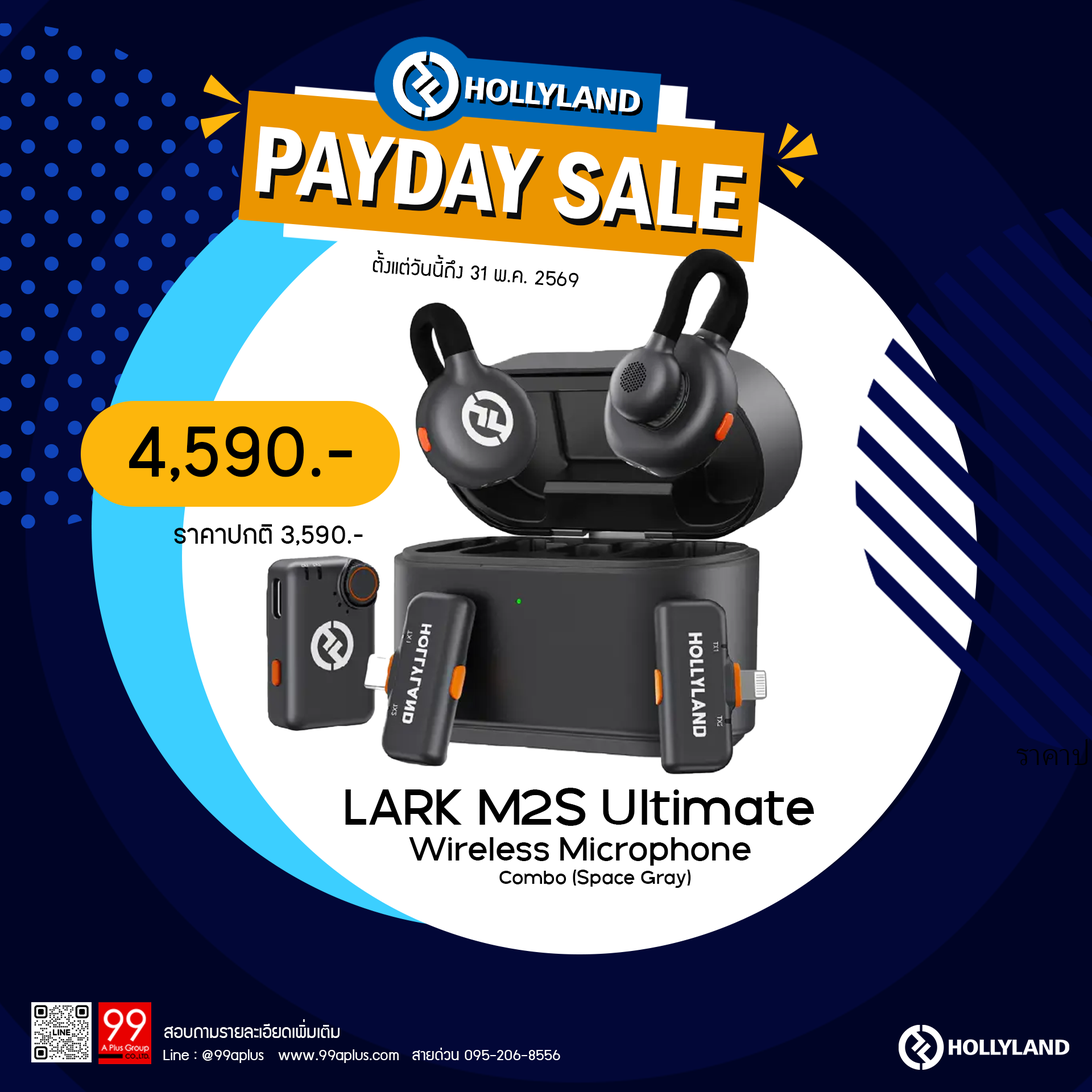
<style>
.page{position:relative;width:1092px;height:1092px;background:#020737}
.page>*{position:absolute;margin:0}
.t1{font:97.5px "FranklinGothic-DemiCond";color:#ffffff}
.t2{font:97.5px "FranklinGothic-DemiCond"}
.t3{font:23.2px "supermarket";color:#000000}
.t4{font:83.5px "PK-NakhonPathom-Demo";color:#000000}
.t5{font:30.3px "PK-NakhonPathom-Demo";color:#000000}
.t6{font:54px "GalakPro-Demo";color:#000000}
.t7{font:35.6px "GalakPro-Demo";color:#000000}
.t8{font:20.4px "GalakPro-Demo";color:#000000}
.t9{font:19.8px "supermarket";color:#ffffff}
.t10{font:17.2px "supermarket";color:#ffffff}
</style>
<div class="page">
<p class="t1" style="left:255px;top:126px;width:488px;height:105px;rotate:5deg">PAYDAY SALE</p>
<p class="t2" style="left:259px;top:133px;width:488px;height:105px;rotate:5deg">PAYDAY SALE</p>
<p class="t3" style="left:373px;top:250px;width:205px;height:37px;rotate:4deg">ตั้งแต่วันนี้ถึง 31 พ.ค. 2569</p>
<p class="t4" style="left:129px;top:426px;width:223px;height:56px">4,590.-</p>
<p class="t5" style="left:174px;top:524px;width:189px;height:21px">ราคาปกติ 3,590.-</p>
<p class="t6" style="left:345px;top:788px;width:469px;height:38px">LARK M2S Ultimate</p>
<p class="t7" style="left:409px;top:837px;width:342px;height:29px">Wireless Microphone</p>
<p class="t8" style="left:499px;top:870px;width:192px;height:18px">Combo (Space Gray)</p>
<p class="t9" style="left:164px;top:1019px;width:176px;height:19px">สอบถามรายละเอียดเพิ่มเติม</p>
<p class="t10" style="left:163px;top:1049px;width:236px;height:14px">Line : @99aplus   www.99aplus.com</p>
<p class="t10" style="left:412px;top:1048px;width:148px;height:12px">สายด่วน 095-206-8556</p>
</div>
